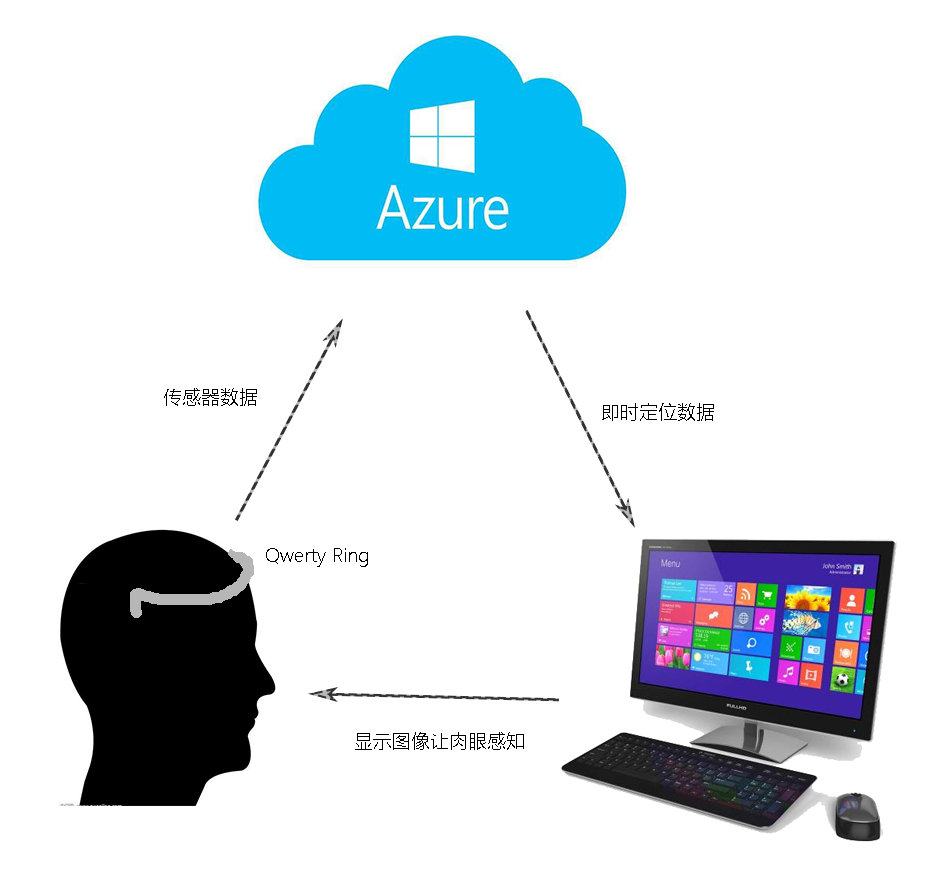
<style>
.page{position:relative;width:943px;height:878px;background:#ffffff}
.page>*{position:absolute;margin:0}
.t1{font:19.2px "MicrosoftYaHeiLight";color:#000000}
</style>
<div class="page">
<p class="t1" style="left:164px;top:388px;width:93px;height:18px">传感器数据</p>
<p class="t1" style="left:602px;top:403px;width:112px;height:18px">即时定位数据</p>
<p class="t1" style="left:266px;top:548px;width:102px;height:19px">Qwerty Ring</p>
<p class="t1" style="left:355px;top:732px;width:169px;height:18px">显示图像让肉眼感知</p>
</div>
